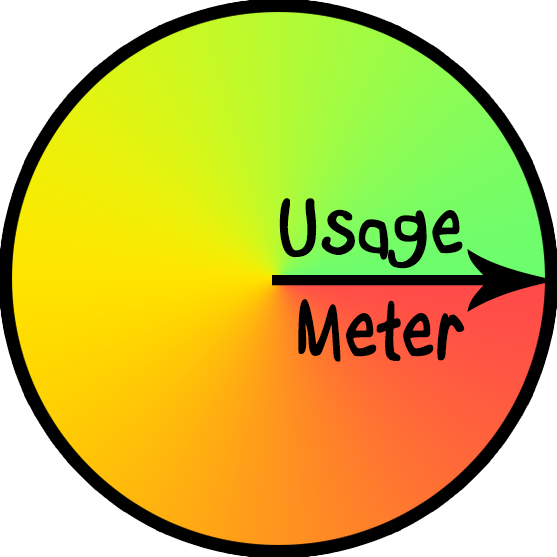
<style>
.page{position:relative;width:557px;height:557px;background:#ffffff}
.page>*{position:absolute;margin:0}
.t1{font:93px/103px "Boopee-Bold";letter-spacing:0.02em;color:#000000}
</style>
<div class="page">
<p class="t1" style="left:279px;top:198px;width:186px;height:164px;text-align:right">Usage<br>Meter</p>
</div>
